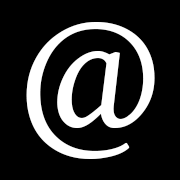
<style>
.page{position:relative;width:180px;height:180px;background:#000000}
.page>*{position:absolute;margin:0}
.t1{font:166.7px "Sylfaen";letter-spacing:0.12em;color:#ffffff}
</style>
<div class="page">
<p class="t1" style="left:26px;top:22px;width:129px;height:137px">@</p>
</div>
